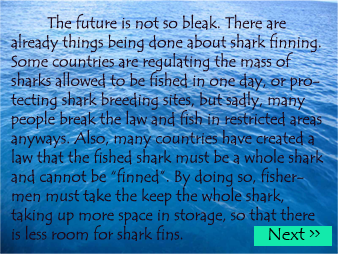
<style>
.page{position:relative;width:338px;height:254px}
.page>*{position:absolute;margin:0}
.t1{font:16px "TempusSansITC";color:#1b0617}
</style>
<div class="page">
<p class="t1" style="left:10px;top:13px;width:314px;height:228px">The future is not so bleak. There are already things being done about shark finning. Some countries are regulating the mass of sharks allowed to be fished in one day, or protecting shark breeding sites, but sadly, many people break the law and fish in restricted areas anyways. Also, many countries have created a law that the fished shark must be a whole shark and cannot be “finned”. By doing so, fishermen must take the keep the whole shark, taking up more space in storage, so that there is less room for shark fins.</p>
</div>
